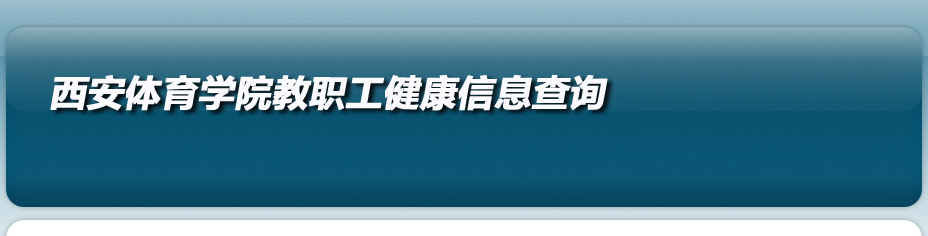
<style>
.page{position:relative;width:928px;height:236px}
.page>*{position:absolute;margin:0}
.t1{font:36px "MicrosoftYaHei";color:#fbfbfd;font-weight:bold;font-style:italic}
</style>
<div class="page">
<p class="t1" style="left:50px;top:74px;width:558px;height:37px">西安体育学院教职工健康信息查询</p>
</div>
